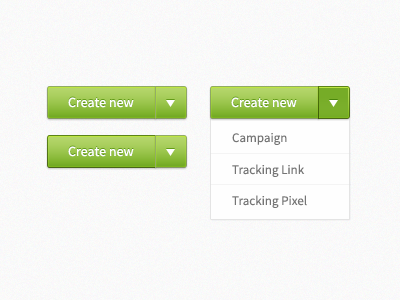
<style>
.page{position:relative;width:400px;height:300px}
.page>*{position:absolute;margin:0}
.t1{font:14px "SourceSansPro-Regular";color:#ffffff}
.t2{font:13px "SourceSansPro-Regular";color:#757575}
</style>
<div class="page">
<p class="t1" style="left:68px;top:97px;width:66px;height:11px">Create new</p>
<p class="t1" style="left:231px;top:97px;width:66px;height:11px">Create new</p>
<p class="t2" style="left:232px;top:133px;width:55px;height:12px">Campaign</p>
<p class="t1" style="left:68px;top:146px;width:66px;height:11px">Create new</p>
<p class="t2" style="left:232px;top:164px;width:73px;height:13px">Tracking Link</p>
<p class="t2" style="left:232px;top:195px;width:75px;height:13px">Tracking Pixel</p>
</div>
